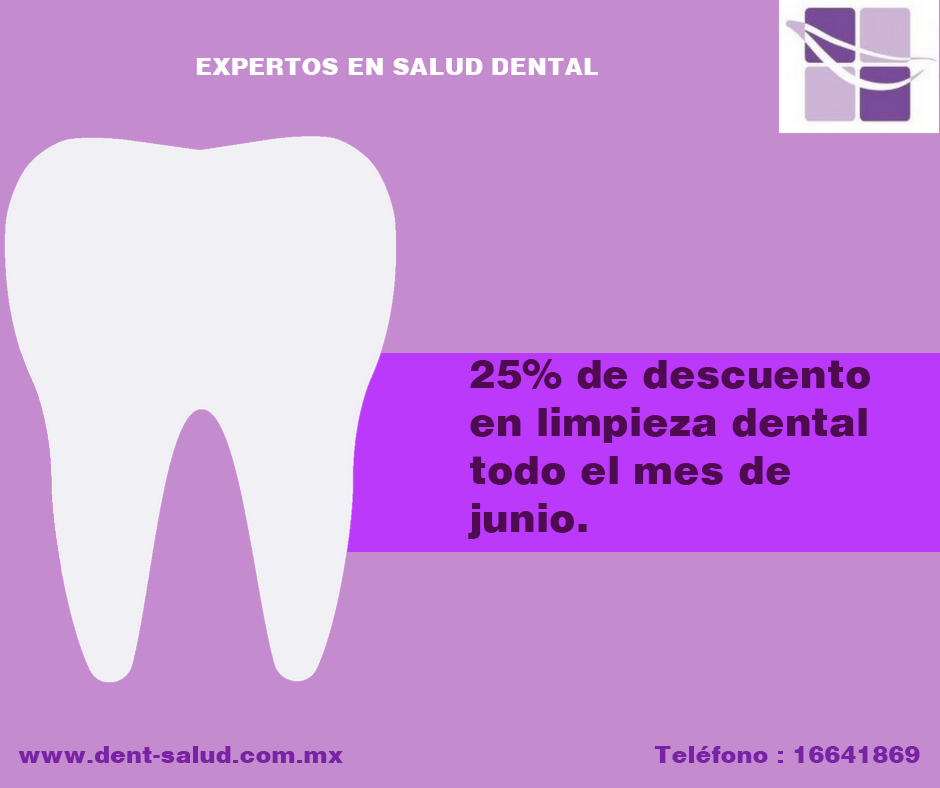
<style>
.page{position:relative;width:940px;height:788px;background:#c48cce}
.page>*{position:absolute;margin:0}
.t1{font:24px "Helvetica-Black";color:#ffffff}
.t2{font:40px "Helvetica-Black";color:#4f0b50}
.t3{font:24px "Helvetica-Black";color:#7922a6}
</style>
<div class="page">
<p class="t1" style="left:196px;top:58px;width:402px;height:17px">EXPERTOS EN SALUD DENTAL</p>
<p class="t2" style="left:468px;top:359px;width:402px;height:180px">25% de descuento<br>en limpieza dental<br>todo el mes de<br>junio.</p>
<p class="t3" style="left:18px;top:746px;width:902px;height:17px">www.dent-salud.com.mx            Teléfono : 16641869</p>
</div>
